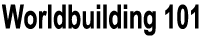
<style>
.page{position:relative;width:204px;height:38px;background:#ffffff}
.page>*{position:absolute;margin:0}
.t1{font:33.2px "Arial-BoldMT";color:#000000;scale:0.7 1}
</style>
<div class="page">
<p class="t1" style="left:2px;top:4px;width:197px;height:32px">Worldbuilding 101</p>
</div>
